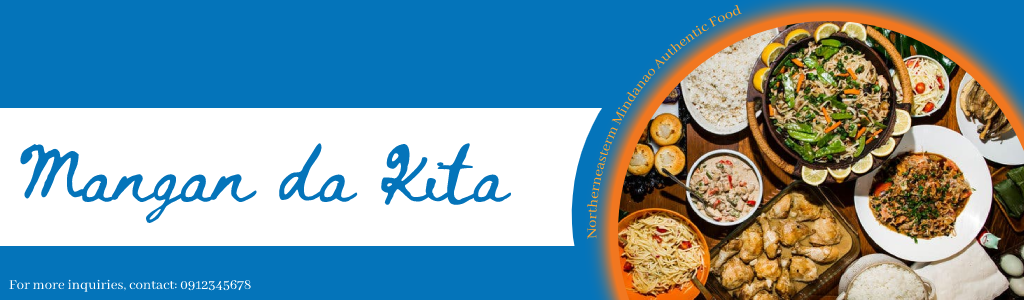
<style>
.page{position:relative;width:1024px;height:300px;background:#0474ba}
.page>*{position:absolute;margin:0}
.t1{font:55px "BethEllen-Regular";color:#0474ba}
.t2{font:15px "AbhayaLibre-Regular";color:#ffffff}
</style>
<div class="page">
<p class="t1" style="left:20px;top:142px;width:492px;height:83px">Mangan da Kita</p>
<p class="t2" style="left:9px;top:279px;width:242px;height:13px">For more inquiries, contact: 0912345678</p>
</div>
